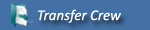
<style>
.page{position:relative;width:150px;height:30px;background:#4371a5}
.page>*{position:absolute;margin:0}
.t1{font:15px "Calibri-Italic";color:#ffffff}
</style>
<div class="page">
<p class="t1" style="left:38px;top:9px;width:83px;height:14px">Transfer Crew</p>
</div>
